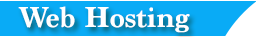
<style>
.page{position:relative;width:269px;height:37px;background:#09abf6}
.page>*{position:absolute;margin:0}
.t1{font:30px "Marion-Bold";color:#ffffff}
</style>
<div class="page">
<p class="t1" style="left:18px;top:6px;width:172px;height:27px">Web Hosting</p>
</div>
